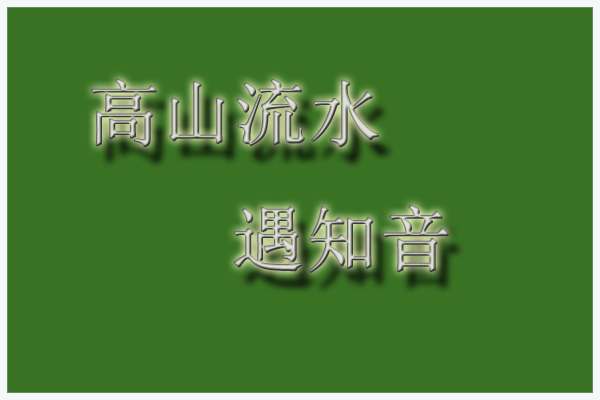
<style>
.page{position:relative;width:600px;height:400px;background:#3a7224}
.page>*{position:absolute;margin:0}
.t1{font:72px "SimSun";font-weight:bold}
</style>
<div class="page">
<p class="t1" style="left:91px;top:78px;width:358px;height:195px;text-align:center">高山流水<br>      遇知音</p>
</div>
